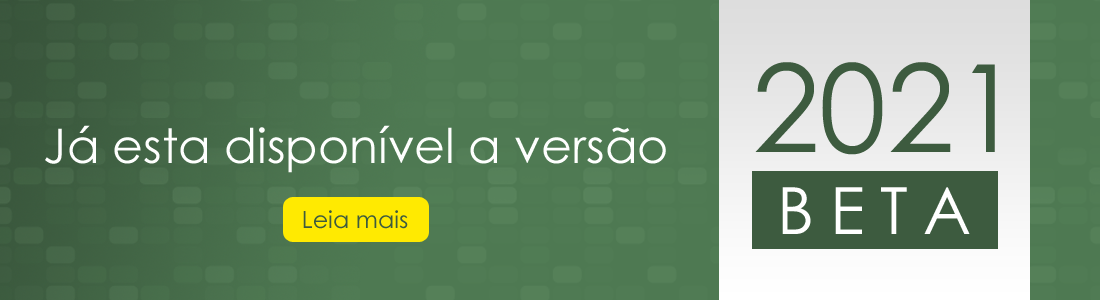
<style>
.page{position:relative;width:1100px;height:300px}
.page>*{position:absolute;margin:0}
.t1{font:121.8px "CenturyGothic";color:#3d5b3f}
.t2{font:47.8px "CenturyGothic";color:#fefffe}
.t3{font:65px "CenturyGothic";letter-spacing:0.24em;color:#ffffff}
.t4{font:23.8px "CenturyGothic";color:#3d5b3f}
</style>
<div class="page">
<p class="t1" style="left:755px;top:62px;width:240px;height:93px">2021</p>
<p class="t2" style="left:45px;top:125px;width:621px;height:48px">Já esta disponível a versão</p>
<p class="t3" style="left:782px;top:187px;width:188px;height:47px">BETA</p>
<p class="t4" style="left:303px;top:210px;width:105px;height:19px">Leia mais</p>
</div>
